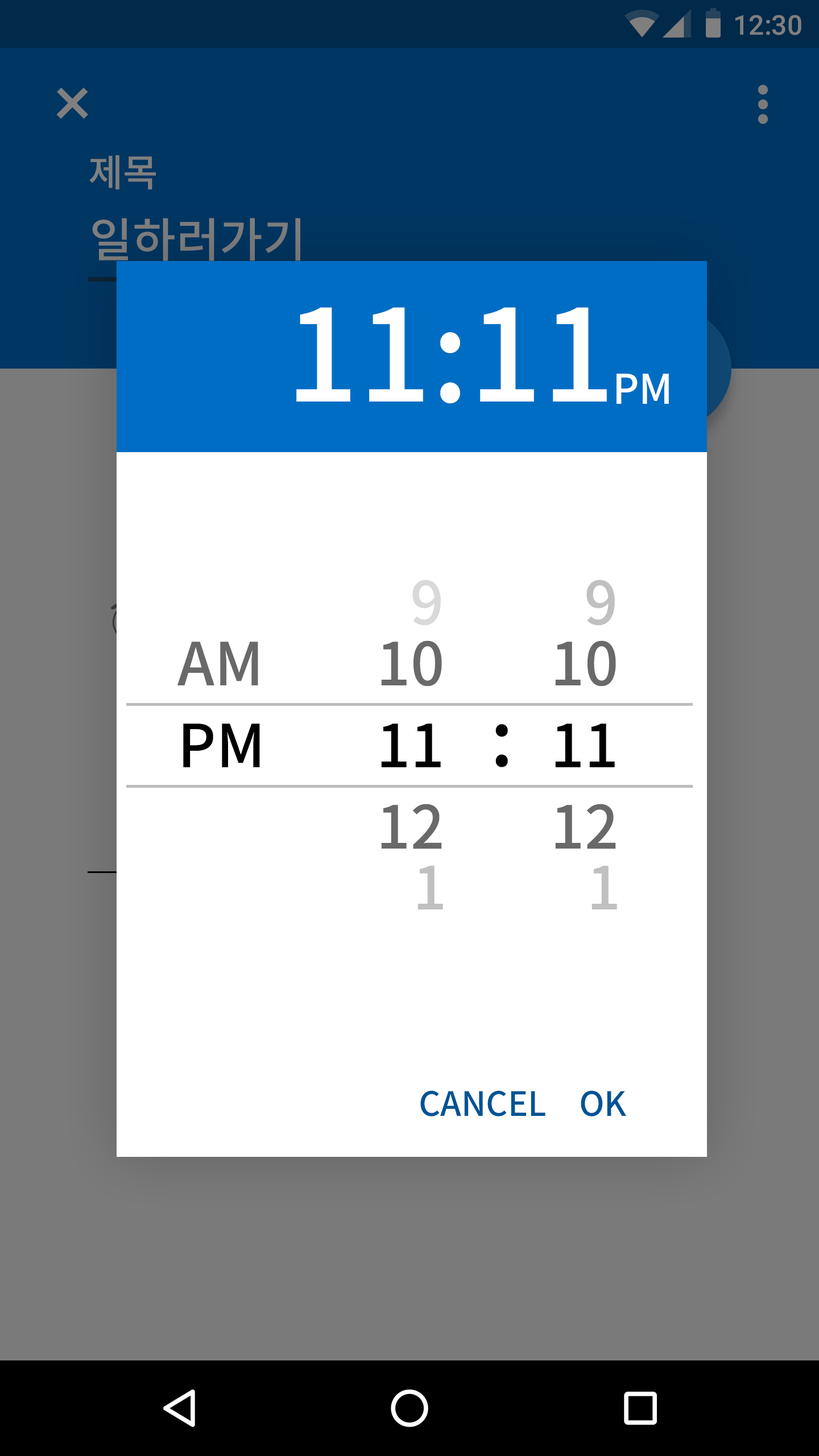
<style>
.page{position:relative;width:819px;height:1456px;background:#ffffff}
.page>*{position:absolute;margin:0}
.t1{font:27.3px "Roboto-Medium";color:#7f7f7f}
.t2{font:38px "NotoSansCJKkr-Medium";color:#7f7f7f}
.t3{font:47.1px "NotoSansCJKkr-Medium";color:#7b7b7b}
.t4{font:127.8px "NotoSansCJKkr-Medium";color:#ffffff}
.t5{font:40.9px "NotoSansCJKkr-Medium";color:#ffffff}
.t6{font:59.3px "NotoSansCJKkr-Medium";color:#d9d9d9}
.t7{font:59.3px "NotoSansCJKkr-Medium";color:#c0c0c0}
.t8{font:59.3px "NotoSansCJKkr-Medium";color:#696969}
.t9{font:59.3px "NotoSansCJKkr-Medium";color:#000000}
.t10{font:77.4px "NotoSansCJKkr-Medium";color:#000000}
.t11{font:33.6px "NotoSansCJKkr-Medium";color:#005395}
</style>
<div class="page">
<p class="t1" style="left:735px;top:15px;width:66px;height:20px">12:30</p>
<p class="t2" style="left:89px;top:155px;width:67px;height:34px">제목</p>
<p class="t3" style="left:92px;top:218px;width:208px;height:43px">일하러가기</p>
<p class="t4" style="left:296px;top:307px;width:311px;height:97px">11:11</p>
<p class="t5" style="left:617px;top:374px;width:52px;height:30px">PM</p>
<p class="t6" style="left:412px;top:580px;width:29px;height:46px">9</p>
<p class="t7" style="left:586px;top:580px;width:29px;height:46px">9</p>
<p class="t8" style="left:177px;top:642px;width:81px;height:43px">AM</p>
<p class="t8" style="left:381px;top:640px;width:61px;height:46px">10</p>
<p class="t8" style="left:555px;top:640px;width:61px;height:46px">10</p>
<p class="t9" style="left:183px;top:723px;width:77px;height:44px">PM</p>
<p class="t9" style="left:381px;top:723px;width:60px;height:44px">11</p>
<p class="t10" style="left:495px;top:724px;width:13px;height:43px">:</p>
<p class="t9" style="left:555px;top:723px;width:60px;height:44px">11</p>
<p class="t8" style="left:381px;top:804px;width:61px;height:45px">12</p>
<p class="t8" style="left:555px;top:804px;width:61px;height:45px">12</p>
<p class="t7" style="left:417px;top:866px;width:26px;height:43px">1</p>
<p class="t7" style="left:591px;top:866px;width:26px;height:43px">1</p>
<p class="t11" style="left:420px;top:1090px;width:125px;height:26px">CANCEL</p>
<p class="t11" style="left:581px;top:1090px;width:45px;height:26px">OK</p>
</div>
